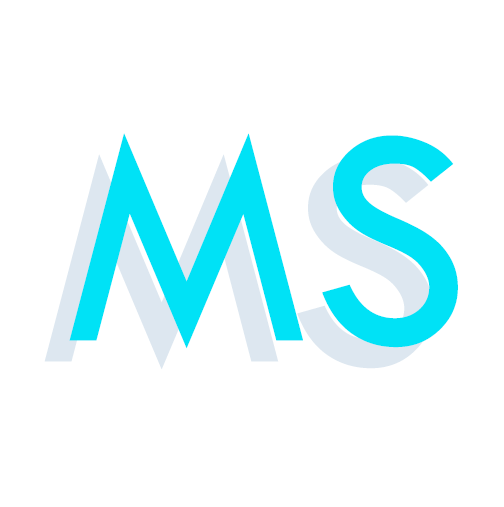
<style>
.page{position:relative;width:504px;height:507px;background:#ffffff}
.page>*{position:absolute;margin:0}
.t1{font:319.2px "TwCenMT-Regular";color:#00e2f6}
.t2{font:319.2px "TwCenMT-Regular";color:#dde7f0}
</style>
<div class="page">
<p class="t1" style="left:69px;top:133px;width:389px;height:216px">MS</p>
<p class="t2" style="left:44px;top:154px;width:389px;height:216px">MS</p>
</div>
